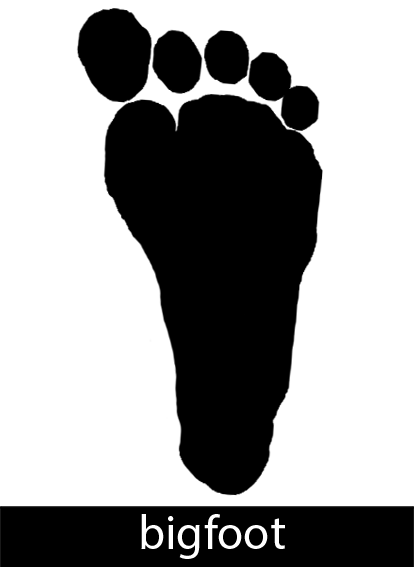
<style>
.page{position:relative;width:414px;height:567px;background:#ffffff}
.page>*{position:absolute;margin:0}
.t1{font:48.1px "MyriadPro-Regular";color:#ffffff}
</style>
<div class="page">
<p class="t1" style="left:141px;top:514px;width:144px;height:45px">bigfoot</p>
</div>
